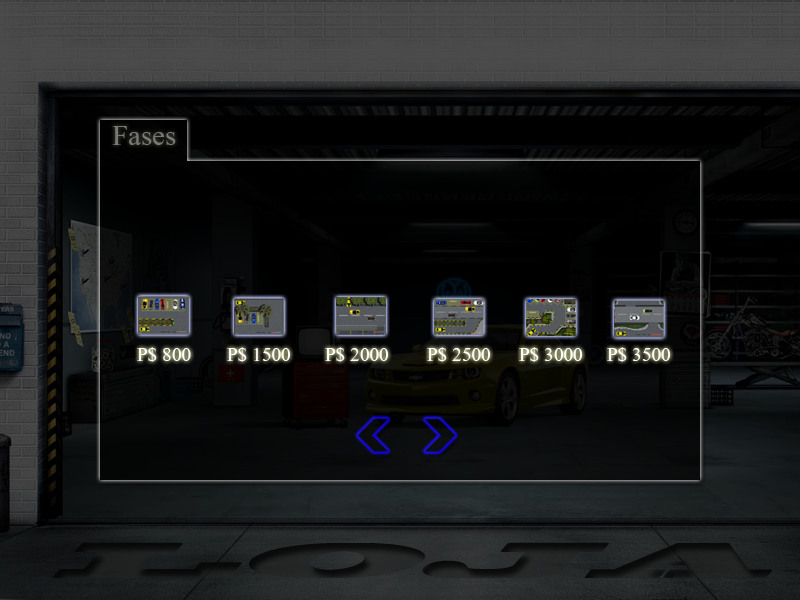
<style>
.page{position:relative;width:800px;height:600px}
.page>*{position:absolute;margin:0}
.t1{font:36px "Aparajita";color:#797878}
.t2{font:24px "Aparajita";color:#ffffff}
.t3{font:61.9px "BlackoakStd";color:#1b1c1c;scale:1.64 1}
</style>
<div class="page">
<p class="t1" style="left:112px;top:126px;width:64px;height:19px">Fases</p>
<p class="t2" style="left:137px;top:347px;width:54px;height:15px">P$ 800</p>
<p class="t2" style="left:227px;top:347px;width:64px;height:15px">P$ 1500</p>
<p class="t2" style="left:325px;top:347px;width:64px;height:15px">P$ 2000</p>
<p class="t2" style="left:427px;top:347px;width:64px;height:15px">P$ 2500</p>
<p class="t2" style="left:519px;top:347px;width:64px;height:15px">P$ 3000</p>
<p class="t2" style="left:607px;top:347px;width:64px;height:15px">P$ 3500</p>
<p class="t3" style="left:52px;top:542px;width:720px;height:37px">LOJA</p>
</div>
